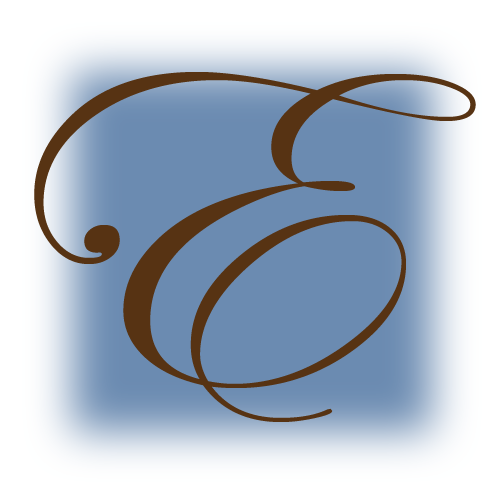
<style>
.page{position:relative;width:500px;height:500px;background:#6b8bb1}
.page>*{position:absolute;margin:0}
.t1{font:500px "EdwardianScriptITC";color:#573313}
</style>
<div class="page">
<p class="t1" style="left:34px;top:72px;width:442px;height:350px">E</p>
</div>
